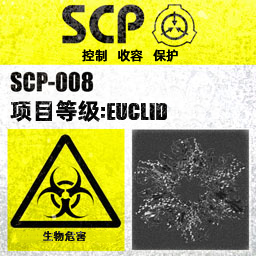
<style>
.page{position:relative;width:256px;height:256px}
.page>*{position:absolute;margin:0}
.t1{font:13px "AlibabaPuHuiTiM";color:#000000}
.t2{font:26px "URWImpactW01-Bold";letter-spacing:0.02em;color:#000000}
.t3{font:23px "AlibabaPuHuiTiB";color:#000000}
.t4{font:31px "URWImpactW01-Bold";letter-spacing:0.02em;color:#000000}
.t5{font:11px "AlibabaPuHuiTiM";letter-spacing:0.02em;color:#121212}
</style>
<div class="page">
<p class="t1" style="left:82px;top:49px;width:96px;height:13px">控制   收容   保护</p>
<p class="t2" style="left:10px;top:100px;width:157px;height:22px"><span class="t3">项目等级</span><span class="t4">:</span>EUCLID</p>
<p class="t5" style="left:43px;top:231px;width:43px;height:11px">生物危害</p>
</div>
